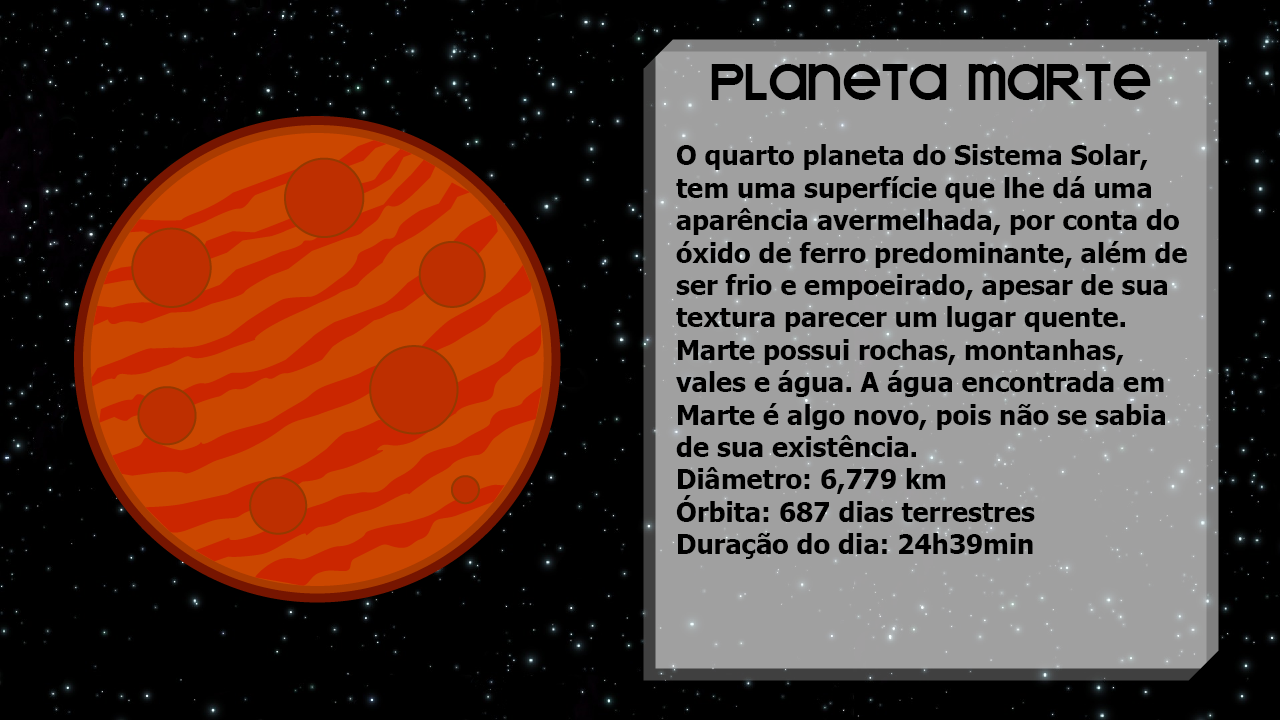
<style>
.page{position:relative;width:1280px;height:720px;background:#000000}
.page>*{position:absolute;margin:0}
.t1{font:58px "KravitzExtraThermal";color:#000000}
.t2{font:27px "Tahoma-Bold";color:#000000}
</style>
<div class="page">
<p class="t1" style="left:711px;top:64px;width:440px;height:36px">PLANETA MARTE</p>
<p class="t2" style="left:676px;top:144px;width:511px;height:415px">O quarto planeta do Sistema Solar, tem uma superfície que lhe dá uma aparência avermelhada, por conta do óxido de ferro predominante, além de ser frio e empoeirado, apesar de sua textura parecer um lugar quente. Marte possui rochas, montanhas, vales e água. A água encontrada em Marte é algo novo, pois não se sabia de sua existência. <br>Diâmetro: 6,779 km<br>Órbita: 687 dias terrestres<br>Duração do dia: 24h39min</p>
</div>
